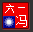
<style>
.page{position:relative;width:33px;height:32px;background:#f20000}
.page>*{position:absolute;margin:0}
.t1{font:10.4px "SimSun";color:#ffffff}
.t2{font:11.7px "SimSun";color:#ffffff}
</style>
<div class="page">
<p class="t1" style="left:5px;top:4px;width:20px;height:9px">六一</p>
<p class="t2" style="left:16px;top:15px;width:11px;height:12px">冯</p>
</div>
